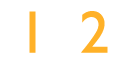
<style>
.page{position:relative;width:128px;height:64px;background:#ffffff}
.page>*{position:absolute;margin:0}
.t1{font:60px "GillSans";color:#ffb128}
</style>
<div class="page">
<p class="t1" style="left:29px;top:11px;width:7px;height:42px">1</p>
<p class="t1" style="left:81px;top:11px;width:27px;height:42px">2</p>
</div>
